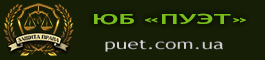
<style>
.page{position:relative;width:265px;height:60px;background:#161e05}
.page>*{position:absolute;margin:0}
.t1{font:14px "TrebuchetMS-Bold";color:#78bf1a;scale:2 1}
.t2{font:14px "TrebuchetMS";color:#cfcfcf;scale:1.5 1}
</style>
<div class="page">
<p class="t1" style="left:94px;top:13px;width:152px;height:12px">ЮБ «ПУЭТ»</p>
<p class="t2" style="left:105px;top:39px;width:118px;height:13px">puet.com.ua</p>
</div>
